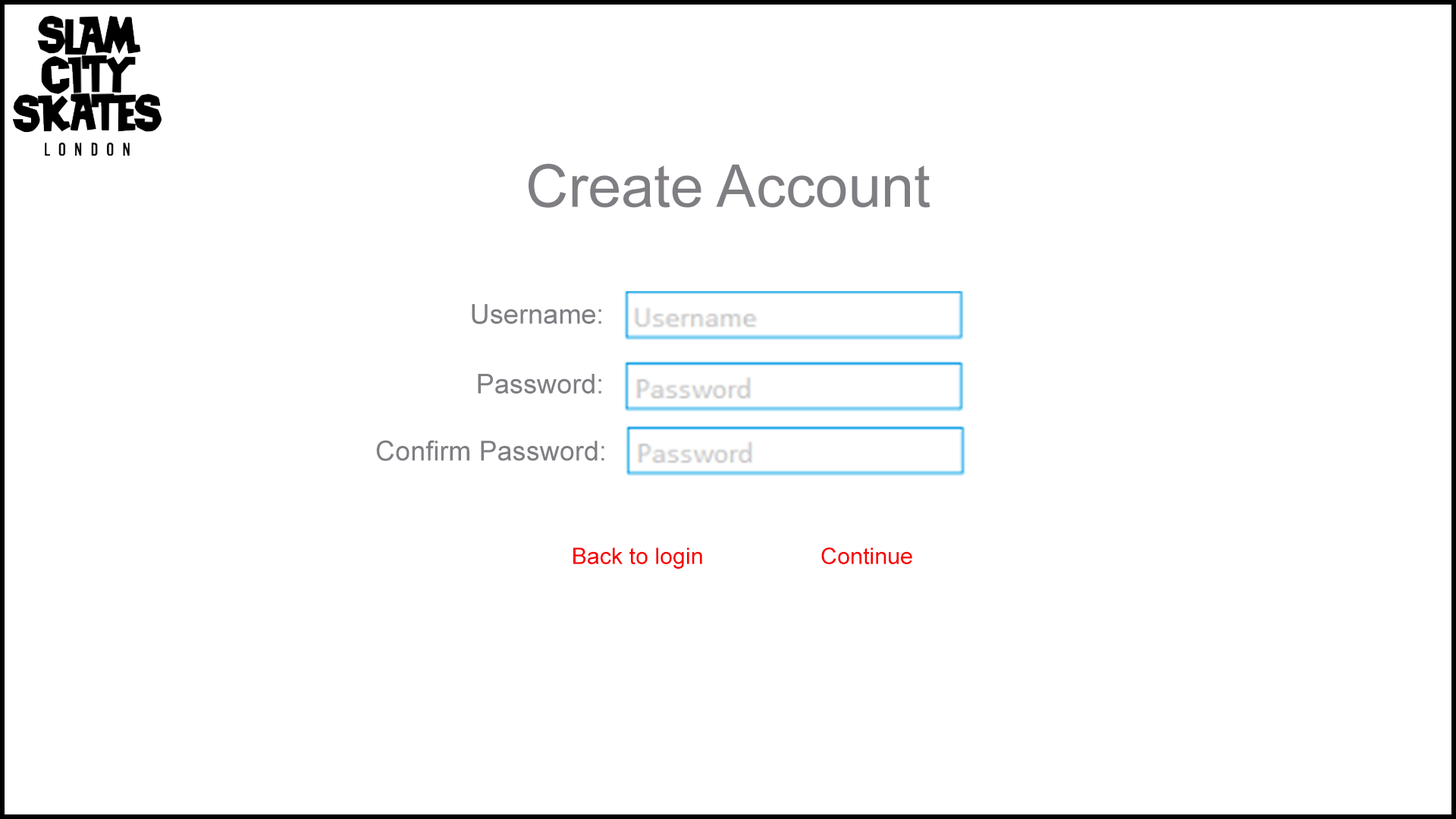
<style>
.page{position:relative;width:1456px;height:819px;background:#ffffff}
.page>*{position:absolute;margin:0}
.t1{font:59px "ArialMT";color:#807d83}
.t2{font:27.3px "ArialMT";color:#807d83}
.t3{font:27.6px "ArialMT";color:#807d83}
.t4{font:22.7px "ArialMT";color:#f70000}
</style>
<div class="page">
<p class="t1" style="left:529px;top:164px;width:401px;height:44px">Create Account</p>
<p class="t2" style="left:472px;top:304px;width:129px;height:21px">Username:</p>
<p class="t2" style="left:478px;top:374px;width:123px;height:20px">Password:</p>
<p class="t3" style="left:376px;top:440px;width:228px;height:21px">Confirm Password:</p>
<p class="t4" style="left:573px;top:548px;width:129px;height:21px">Back to login</p>
<p class="t4" style="left:821px;top:548px;width:91px;height:16px">Continue</p>
</div>
